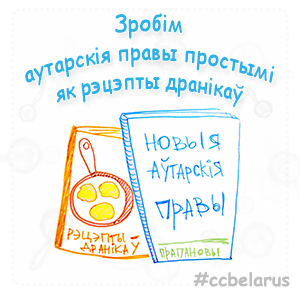
<style>
.page{position:relative;width:300px;height:300px;background:#fefefe}
.page>*{position:absolute;margin:0}
.t1{font:24px "ComicSansMS";color:#2bb1e7;scale:0.71 1}
.t2{font:18px "ComicSansMS-Bold";color:#bebebe}
</style>
<div class="page">
<p class="t1" style="left:25px;top:13px;width:250px;height:95px;text-align:center">Зробім <br>аутарскія правы простымі <br>як рэцэпты дранікаў</p>
<p class="t2" style="left:193px;top:271px;width:97px;height:16px">#ccbelarus</p>
</div>
